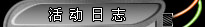
<style>
.page{position:relative;width:205px;height:27px}
.page>*{position:absolute;margin:0}
.t1{font:14px "SimSun";color:#ffffff}
</style>
<div class="page">
<p class="t1" style="left:49px;top:8px;width:76px;height:13px">活 动 日 志</p>
</div>
